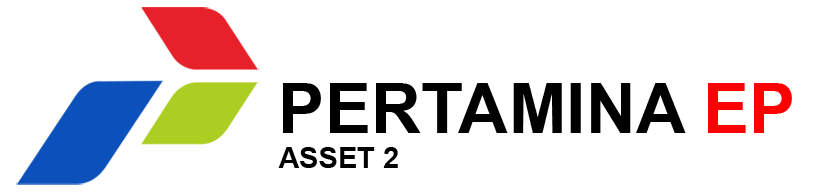
<style>
.page{position:relative;width:820px;height:193px;background:#ffffff}
.page>*{position:absolute;margin:0}
.t1{font:69.5px "Arial-BoldMT";color:#000000}
.t2{font:69.5px "Arial-BoldMT";color:#fd0101}
.t3{font:28.9px "Arial-BoldMT";color:#000000}
</style>
<div class="page">
<p class="t1" style="left:278px;top:83px;width:514px;height:85px">PERTAMINA <span class="t2">EP <br></span><span class="t3">ASSET 2</span></p>
</div>
